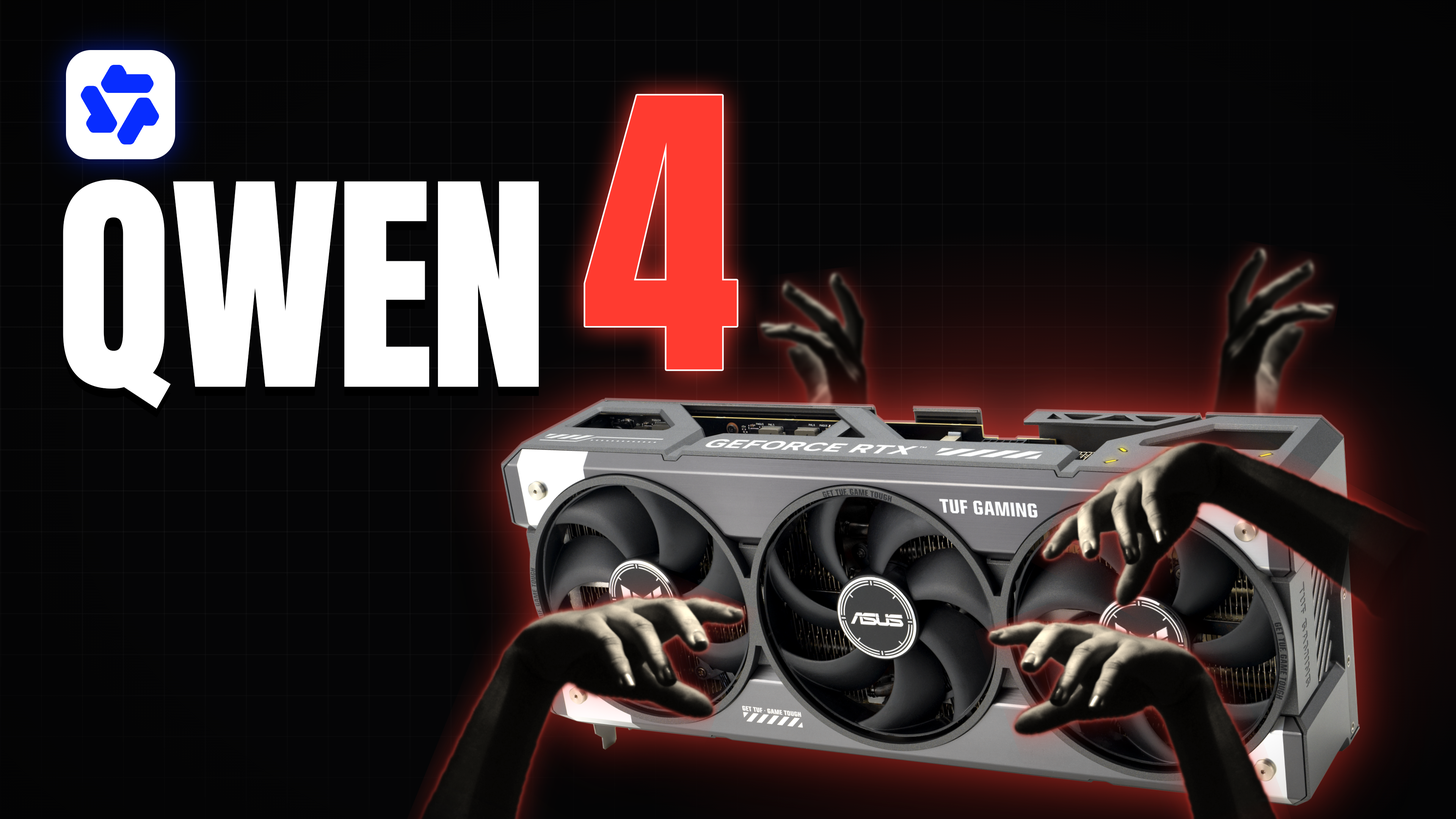
<style>
.page{position:relative;width:1456px;height:819px;background:#050506}
.page>*{position:absolute;margin:0}
.t1{font:318.5px "Anton-Regular";letter-spacing:-0.02em;color:#ff3b30}
.t2{font:238.9px "Anton-Regular";letter-spacing:-0.02em;color:#ffffff}
</style>
<div class="page">
<p class="t1" style="left:585px;top:95px;width:152px;height:275px">4</p>
<p class="t2" style="left:63px;top:179px;width:476px;height:230px">QWEN</p>
</div>
